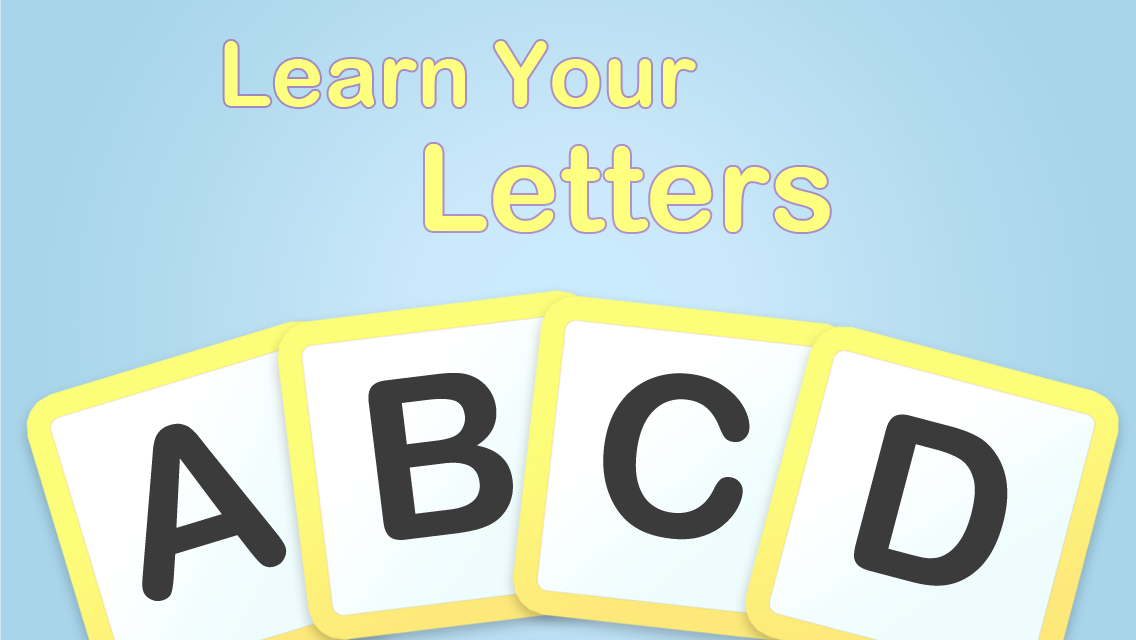
<style>
.page{position:relative;width:1136px;height:640px}
.page>*{position:absolute;margin:0}
.t1{font:89.3px/125.7px "ArialRoundedMTBold";color:#fdff7f}
.t2{font:120.5px/125.7px "ArialRoundedMTBold";color:#fdff7f}
.t3{font:223.7px "ArialRoundedMTBold";color:#3b3b3b}
</style>
<div class="page">
<p class="t1" style="left:224px;top:41px;width:606px;height:191px">Learn Your<br>         <span class="t2">Letters</span></p>
<p class="t3" style="left:368px;top:373px;width:145px;height:167px;rotate:-7deg">B</p>
<p class="t3" style="left:603px;top:373px;width:147px;height:167px;rotate:6deg">C</p>
<p class="t3" style="left:854px;top:414px;width:154px;height:172px;rotate:15deg">D</p>
<p class="t3" style="left:142px;top:423px;width:145px;height:178px;rotate:-17deg">A</p>
</div>
